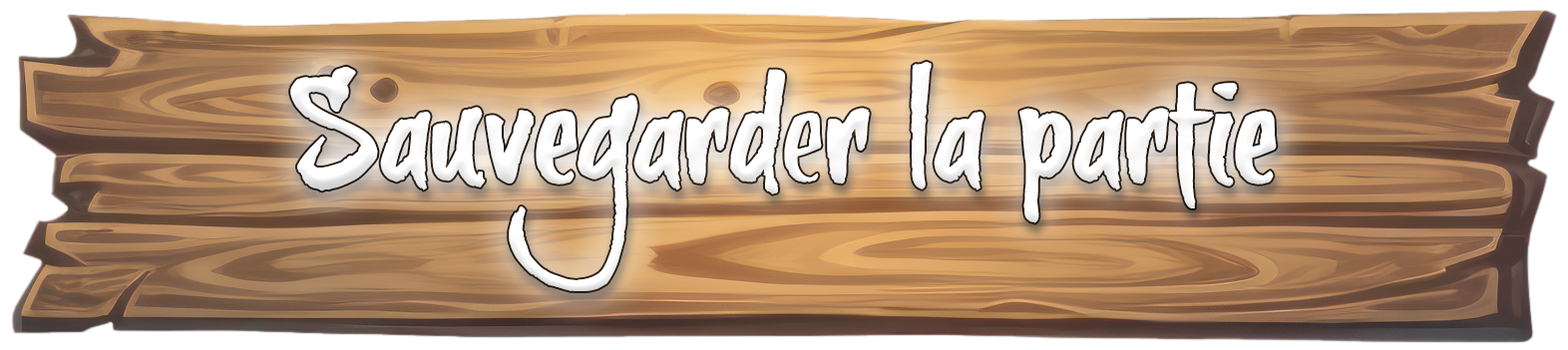
<style>
.page{position:relative;width:1568px;height:350px}
.page>*{position:absolute;margin:0}
.t1{font:141.6px "brushtipTexeTRIAL";color:#ffffff;font-weight:bold}
</style>
<div class="page">
<p class="t1" style="left:290px;top:62px;width:987px;height:229px">Sauvegarder la partie</p>
</div>
